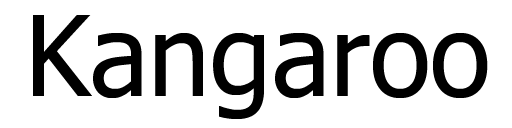
<style>
.page{position:relative;width:512px;height:128px;background:#ffffff}
.page>*{position:absolute;margin:0}
.t1{font:111px "Tahoma";color:#000000}
</style>
<div class="page">
<p class="t1" style="left:33px;top:15px;width:455px;height:104px">Kangaroo</p>
</div>
